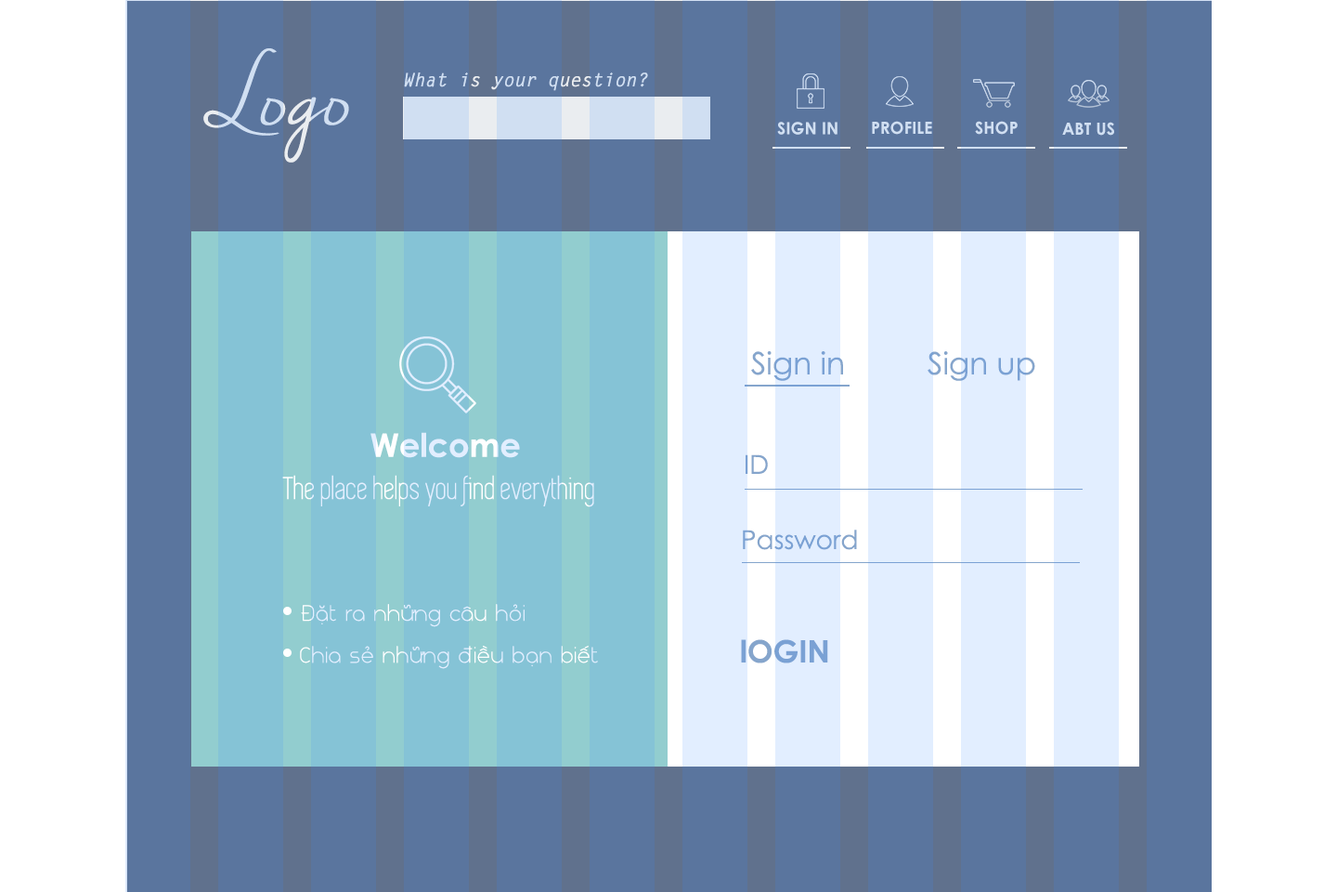
<style>
.page{position:relative;width:1337px;height:892px;background:#ffffff}
.page>*{position:absolute;margin:0}
.t1{font:88.7px "NellaSueDemo"}
.t2{font:18.6px "LetterGothicStd-BoldSlanted";color:#d0dff2}
.t3{font:16.7px "CenturyGothic-Bold";color:#d0dff2}
.t4{font:30.6px "CenturyGothic";color:#7aa1d4}
.t5{font:32.5px "CenturyGothic-Bold"}
.t6{font:26px "CenturyGothic";color:#85a5cc}
.t7{font:32.5px "iCielSimplifica"}
.t8{font:26px "CenturyGothic";color:#7aa1d4}
.t9{font:22.3px "FS-Nokio-Light"}
.t10{font:30.6px "CenturyGothic-Bold";color:#7aa1d4}
</style>
<div class="page">
<p class="t1" style="left:203px;top:48px;width:146px;height:115px">Logo</p>
<p class="t2" style="left:404px;top:72px;width:244px;height:19px">What is your question?</p>
<p class="t3" style="left:777px;top:122px;width:61px;height:13px">SIGN IN</p>
<p class="t3" style="left:872px;top:121px;width:60px;height:14px">PROFILE</p>
<p class="t3" style="left:975px;top:121px;width:43px;height:14px">SHOP</p>
<p class="t3" style="left:1062px;top:122px;width:53px;height:14px">ABT US</p>
<p class="t4" style="left:751px;top:351px;width:92px;height:30px">Sign in</p>
<p class="t4" style="left:928px;top:351px;width:108px;height:30px">Sign up</p>
<p class="t5" style="left:371px;top:432px;width:149px;height:26px">Welcome</p>
<p class="t6" style="left:746px;top:454px;width:22px;height:20px">ID</p>
<p class="t7" style="left:282px;top:475px;width:312px;height:32px">The place helps you find everything</p>
<p class="t8" style="left:743px;top:529px;width:114px;height:21px">Password</p>
<p class="t9" style="left:301px;top:604px;width:224px;height:23px">Đặt ra những câu hỏi</p>
<p class="t10" style="left:741px;top:639px;width:87px;height:24px">lOGIN</p>
<p class="t9" style="left:300px;top:645px;width:298px;height:24px">Chia sẻ những điều bạn biết</p>
</div>
